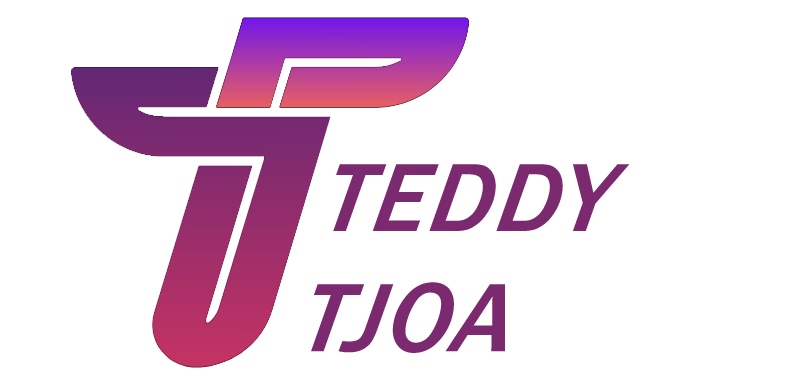
<style>
.page{position:relative;width:800px;height:384px;background:#ffffff}
.page>*{position:absolute;margin:0}
.t1{font:101.7px "FranklinGothic-MediumItalic";letter-spacing:0.03em;color:#7c2a70}
</style>
<div class="page">
<p class="t1" style="left:311px;top:164px;width:319px;height:189px">TEDDY<br>TJOA</p>
</div>
